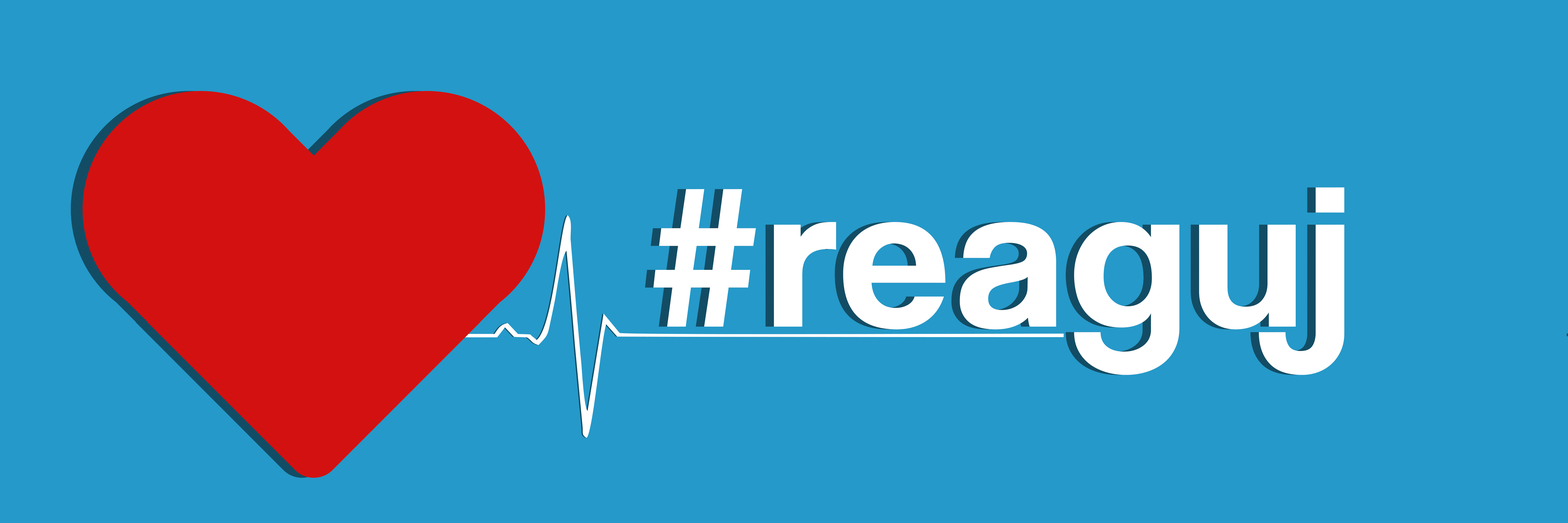
<style>
.page{position:relative;width:1568px;height:523px;background:#2599c9}
.page>*{position:absolute;margin:0}
.t1{font:206.9px "CoolveticaRg-Regular";letter-spacing:0.04em;color:#ffffff;scale:1.05 1}
</style>
<div class="page">
<p class="t1" style="left:653px;top:187px;width:691px;height:188px">#reaguj</p>
</div>
